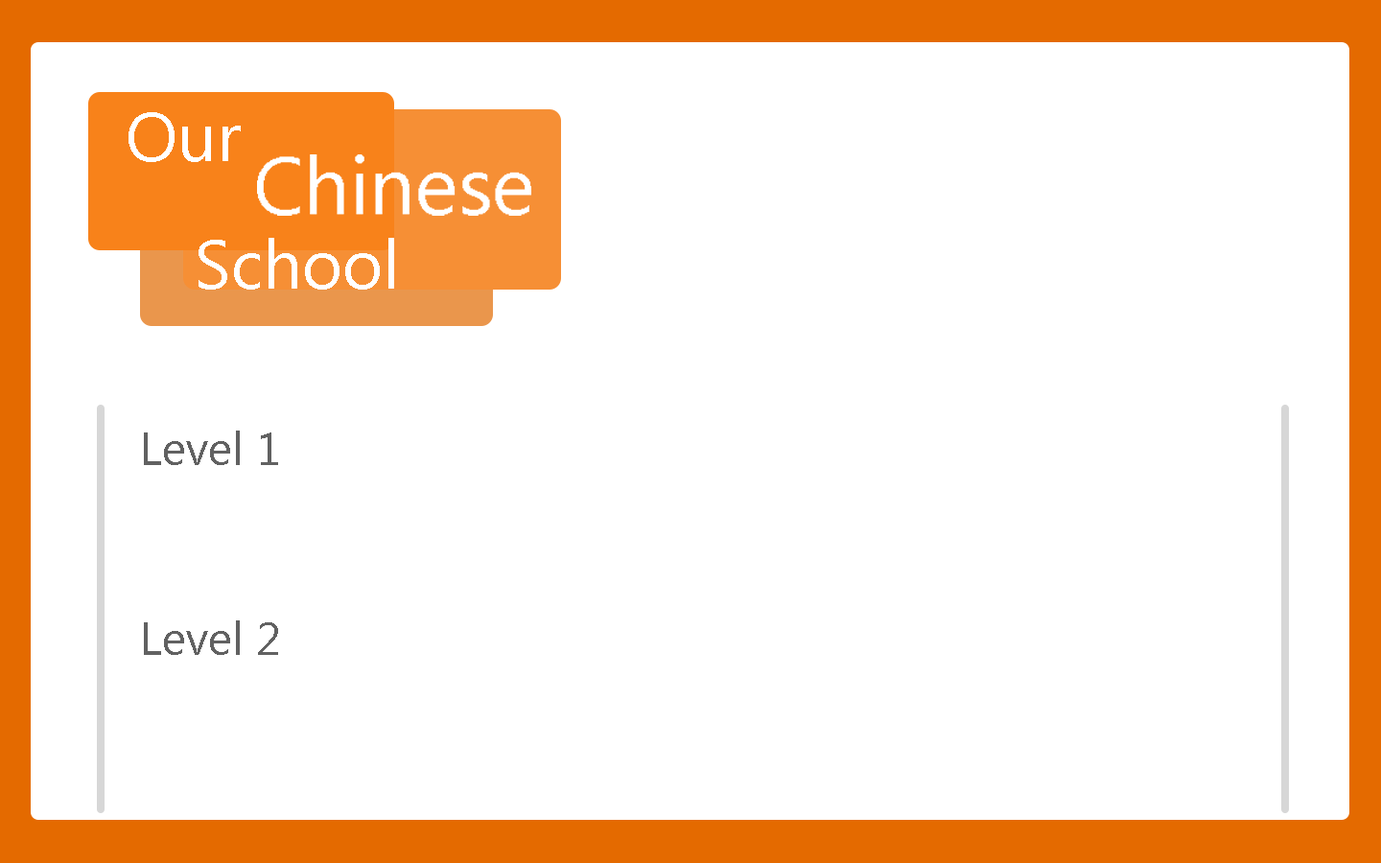
<style>
.page{position:relative;width:1381px;height:863px;background:#ffffff}
.page>*{position:absolute;margin:0}
.t1{font:69.1px "MicrosoftTaiLe";color:#ffffff}
.t2{font:46px "MicrosoftTaiLe";color:#616161}
</style>
<div class="page">
<p class="t1" style="left:129px;top:112px;width:112px;height:50px">Our</p>
<p class="t2" style="left:144px;top:431px;width:134px;height:34px">Level 1</p>
<p class="t2" style="left:144px;top:621px;width:134px;height:34px">Level 2</p>
</div>
